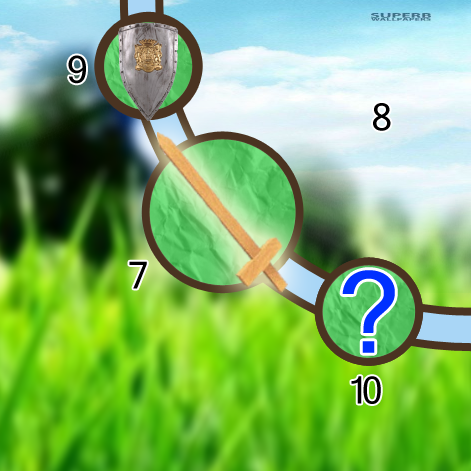
<style>
.page{position:relative;width:471px;height:471px}
.page>*{position:absolute;margin:0}
.t1{font:36px "Kartika";letter-spacing:-0.18em;color:#000000}
.t2{font:108.9px "Kartika";letter-spacing:-0.18em;color:#0030ff}
</style>
<div class="page">
<p class="t1" style="left:68px;top:55px;width:18px;height:29px">9</p>
<p class="t1" style="left:373px;top:103px;width:18px;height:28px">8</p>
<p class="t1" style="left:129px;top:261px;width:18px;height:28px">7</p>
<p class="t2" style="left:342px;top:270px;width:53px;height:83px">?</p>
<p class="t1" style="left:351px;top:376px;width:30px;height:28px">10</p>
</div>
